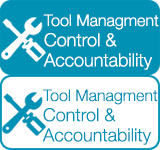
<style>
.page{position:relative;width:160px;height:150px;background:#0091b5}
.page>*{position:absolute;margin:0}
.t1{font:18px/32px "HelveticaNeue-Light";color:#ffffff}
.t2{font:16px/32px "HelveticaNeue-Light";color:#ffffff}
.t3{font:18px/32px "HelveticaNeue-Light";color:#0091b5}
.t4{font:16px/32px "HelveticaNeue-Light";color:#0091b5}
</style>
<div class="page">
<p class="t1" style="left:43px;top:14px;width:116px;height:56px"><span class="t2">Tool Managment<br></span>Control &amp;<br>Accountability</p>
<p class="t3" style="left:42px;top:89px;width:116px;height:56px"><span class="t4">Tool Managment<br></span>Control &amp;<br>Accountability</p>
</div>
